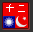
<style>
.page{position:relative;width:33px;height:32px;background:#f20000}
.page>*{position:absolute;margin:0}
.t1{font:10.4px "SimSun";color:#ffffff}
</style>
<div class="page">
<p class="t1" style="left:6px;top:4px;width:19px;height:8px">十二</p>
</div>
